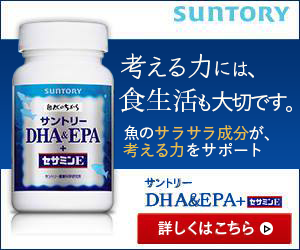
<style>
.page{position:relative;width:300px;height:250px}
.page>*{position:absolute;margin:0}
.t1{font:26px "Klee-Medium";color:#fffff5}
.t2{font:28px "Klee-Medium";color:#fffff5}
.t3{font:21px "Klee-Medium";color:#fffff5}
.t4{font:19px "Klee-Medium";color:#fffff5}
.t5{font:21px "YuGo-Medium";color:#fffff5}
.t6{font:27px "HiraMinPro-W3";color:#fffff5}
.t7{font:26px "HiraMinPro-W3";color:#fffff5}
.t8{font:19px "HiraMinPro-W3";color:#fffff5}
.t9{font:23px "YuGo-Medium";color:#fffff5}
.t10{font:20px "Klee-Medium";color:#fffff5}
.t11{font:16px "YuGo-Medium";color:#e6bc4e}
.t12{font:16px "YuGo-Medium";color:#fffff5}
.t13{font:16px "YuGo-Medium";color:#e7be41}
.t14{font:16px "YuGo-Medium";color:#e5bf43}
.t15{font:12px "Klee-Medium";color:#00469b}
.t16{font:18px "Klee-Medium";color:#00469b}
.t17{font:16px "YuGo-Medium";color:#ffffff}
</style>
<div class="page">
<p class="t1" style="left:121px;top:53px;width:133px;height:26px"><span class="t2">考</span>える<span class="t2">力</span><span class="t3">に</span><span class="t4">は</span>、</p>
<p class="t5" style="left:119px;top:87px;width:173px;height:26px"><span class="t6">食生</span><span class="t7">活</span><span class="t8">も</span><span class="t9">大</span>切です<span class="t10">。</span></p>
<p class="t11" style="left:124px;top:125px;width:145px;height:16px"><span class="t12">魚の</span>サラサラ<span class="t13">成分</span><span class="t12">が、</span></p>
<p class="t12" style="left:123px;top:142px;width:138px;height:16px"><span class="t14">考える力</span>をサポート</p>
<p class="t15" style="left:144px;top:177px;width:48px;height:11px">サントリー</p>
<p class="t16" style="left:147px;top:193px;width:99px;height:14px">DHA&amp;EPA+</p>
<p class="t17" style="left:158px;top:220px;width:96px;height:15px">詳しくはこちら</p>
</div>
